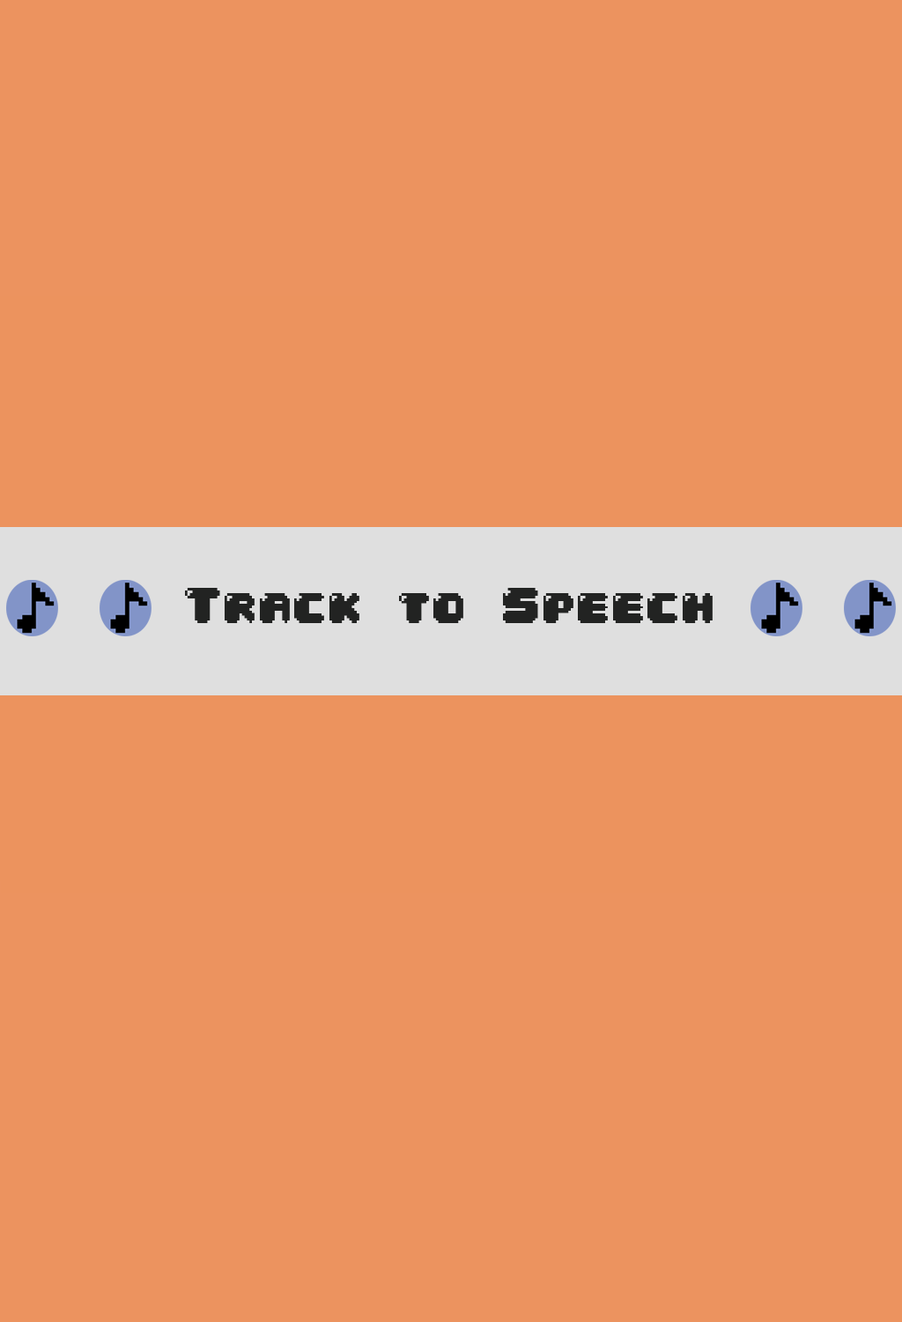
<style>
.page{position:relative;width:902px;height:1322px;background:#ec935f}
.page>*{position:absolute;margin:0}
.t1{font:42.3px "04b30";color:#222322}
</style>
<div class="page">
<p class="t1" style="left:185px;top:588px;width:528px;height:35px">Track to Speech</p>
</div>
